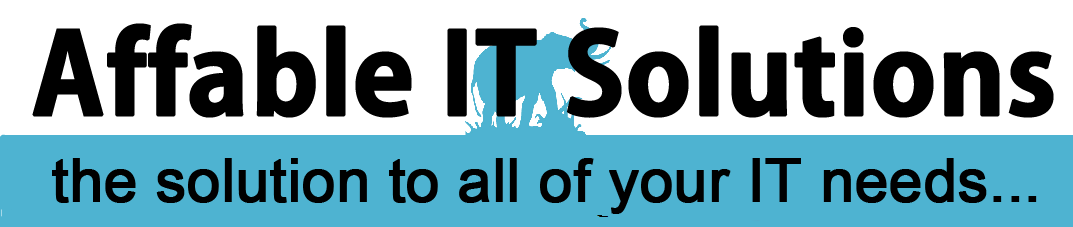
<style>
.page{position:relative;width:1073px;height:227px;background:#ffffff}
.page>*{position:absolute;margin:0}
.t1{font:110px "AdobeGothicStd-Bold";letter-spacing:-0.01em;color:#000000;font-weight:bold}
.t2{font:60px "ArialMT";letter-spacing:-0.01em;color:#000000;font-weight:bold}
</style>
<div class="page">
<p class="t1" style="left:32px;top:23px;width:1022px;height:95px">Affable IT Solutions</p>
<p class="t2" style="left:52px;top:158px;width:985px;height:56px">the solution to all of your IT needs...</p>
</div>
